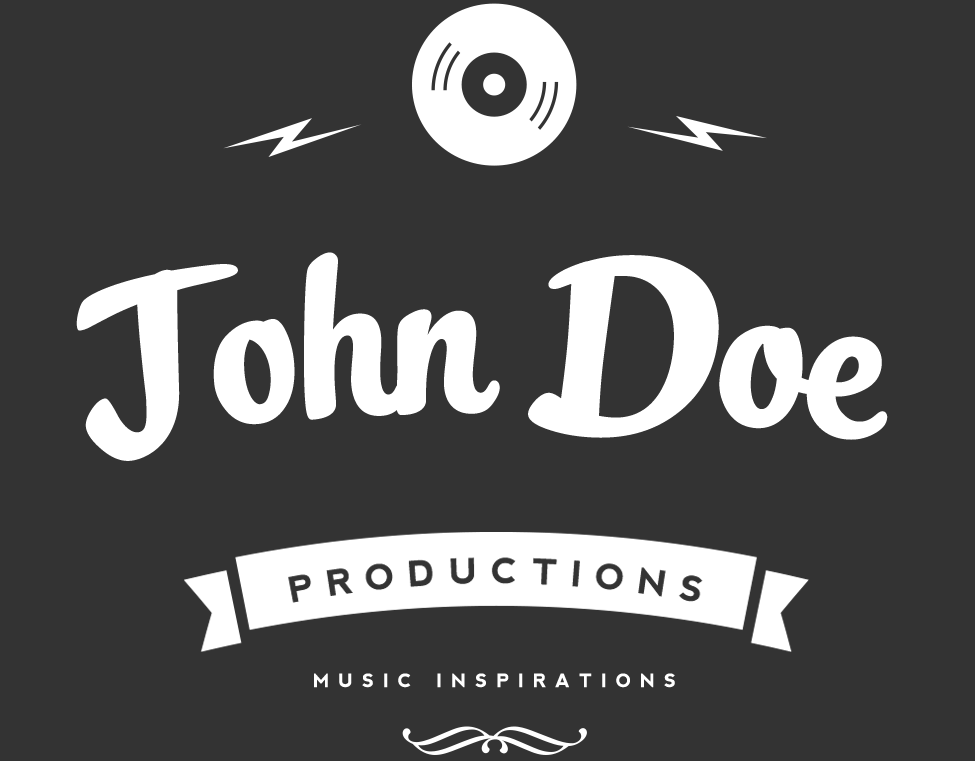
<style>
.page{position:relative;width:975px;height:761px;background:#333333}
.page>*{position:absolute;margin:0}
.t1{font:212.3px "StreetscriptRedux";color:#ffffff}
.t2{font:18.5px "nevis-Bold";letter-spacing:0.5em;color:#ffffff;text-transform:uppercase}
</style>
<div class="page">
<p class="t1" style="left:76px;top:252px;width:812px;height:209px">John Doe</p>
<p class="t2" style="left:314px;top:673px;width:361px;height:15px">music inspirations</p>
</div>
